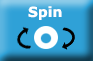
<style>
.page{position:relative;width:93px;height:61px;background:#2fa1d7}
.page>*{position:absolute;margin:0}
.t1{font:14px "Verdana-Bold";color:#ffffff}
</style>
<div class="page">
<p class="t1" style="left:28px;top:6px;width:34px;height:14px">Spin</p>
</div>
